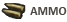
<style>
.page{position:relative;width:67px;height:22px;background:#ffffff}
.page>*{position:absolute;margin:0}
.t1{font:12px "Calibri-Bold";color:#4c4843}
</style>
<div class="page">
<p class="t1" style="left:30px;top:7px;width:37px;height:8px">AMMO</p>
</div>
